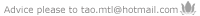
<style>
.page{position:relative;width:200px;height:16px;background:#ffffff}
.page>*{position:absolute;margin:0}
.t1{font:9px "Verdana";color:#868484}
</style>
<div class="page">
<p class="t1" style="left:4px;top:6px;width:174px;height:9px">Advice please to tao.mtl@hotmail.com</p>
</div>
